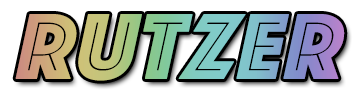
<style>
.page{position:relative;width:356px;height:99px;background:#ffffff}
.page>*{position:absolute;margin:0}
.t1{font:96.1px "Phosphate-Inline";font-weight:bold;font-style:italic}
</style>
<div class="page">
<p class="t1" style="left:15px;top:14px;width:330px;height:67px">Rutzer</p>
</div>
